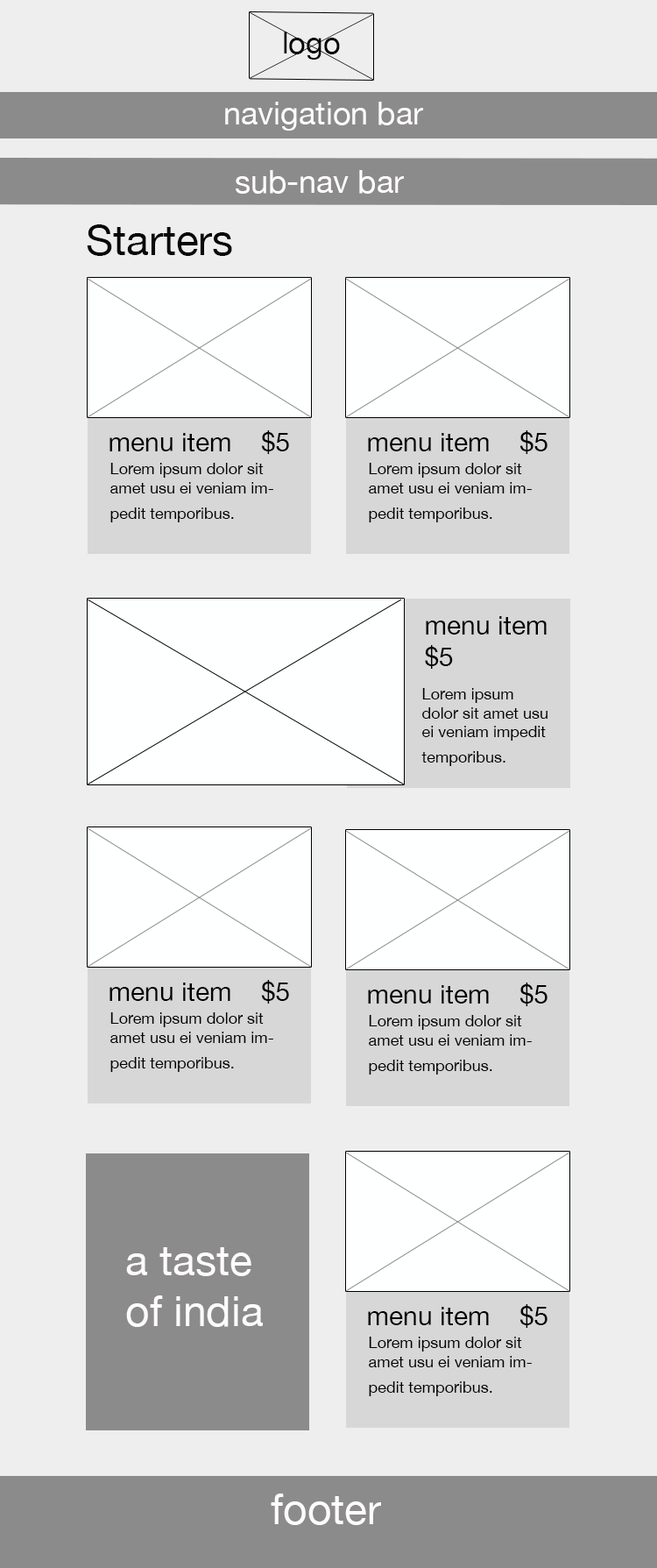
<style>
.page{position:relative;width:657px;height:1568px;background:#eeeeee}
.page>*{position:absolute;margin:0}
.t1{font:30.3px "HelveticaNeue";color:#030303}
.t2{font:31.6px "HelveticaNeue";color:#fffbfb}
.t3{font:42.1px "HelveticaNeue";color:#080808}
.t4{font:26.3px "HelveticaNeue";color:#020202}
.t5{font:15.8px "HelveticaNeue";color:#020202}
.t6{font:42.1px "HelveticaNeue";color:#fffbfb}
</style>
<div class="page">
<p class="t1" style="left:284px;top:32px;width:56px;height:28px">logo</p>
<p class="t2" style="left:225px;top:102px;width:198px;height:29px">navigation bar</p>
<p class="t2" style="left:236px;top:170px;width:168px;height:24px">sub-nav bar</p>
<p class="t3" style="left:87px;top:224px;width:145px;height:32px">Starters</p>
<p class="t4" style="left:110px;top:430px;width:179px;height:24px">menu item    $5</p>
<p class="t4" style="left:368px;top:430px;width:180px;height:24px">menu item    $5</p>
<p class="t5" style="left:110px;top:463px;width:163px;height:59px">Lorem ipsum dolor sit amet usu ei veniam impedit temporibus.</p>
<p class="t5" style="left:369px;top:463px;width:163px;height:59px">Lorem ipsum dolor sit amet usu ei veniam impedit temporibus.</p>
<p class="t4" style="left:425px;top:616px;width:122px;height:53px">menu item    <br>$5</p>
<p class="t5" style="left:422px;top:688px;width:126px;height:78px">Lorem ipsum dolor sit amet usu ei veniam impedit temporibus.</p>
<p class="t4" style="left:110px;top:980px;width:179px;height:24px">menu item    $5</p>
<p class="t4" style="left:368px;top:983px;width:180px;height:23px">menu item    $5</p>
<p class="t5" style="left:110px;top:1012px;width:163px;height:60px">Lorem ipsum dolor sit amet usu ei veniam impedit temporibus.</p>
<p class="t5" style="left:369px;top:1015px;width:163px;height:60px">Lorem ipsum dolor sit amet usu ei veniam impedit temporibus.</p>
<p class="t6" style="left:126px;top:1247px;width:137px;height:80px">a taste <br>of india</p>
<p class="t4" style="left:368px;top:1304px;width:180px;height:24px">menu item    $5</p>
<p class="t5" style="left:369px;top:1337px;width:163px;height:59px">Lorem ipsum dolor sit amet usu ei veniam impedit temporibus.</p>
<p class="t6" style="left:271px;top:1494px;width:110px;height:31px">footer</p>
</div>
